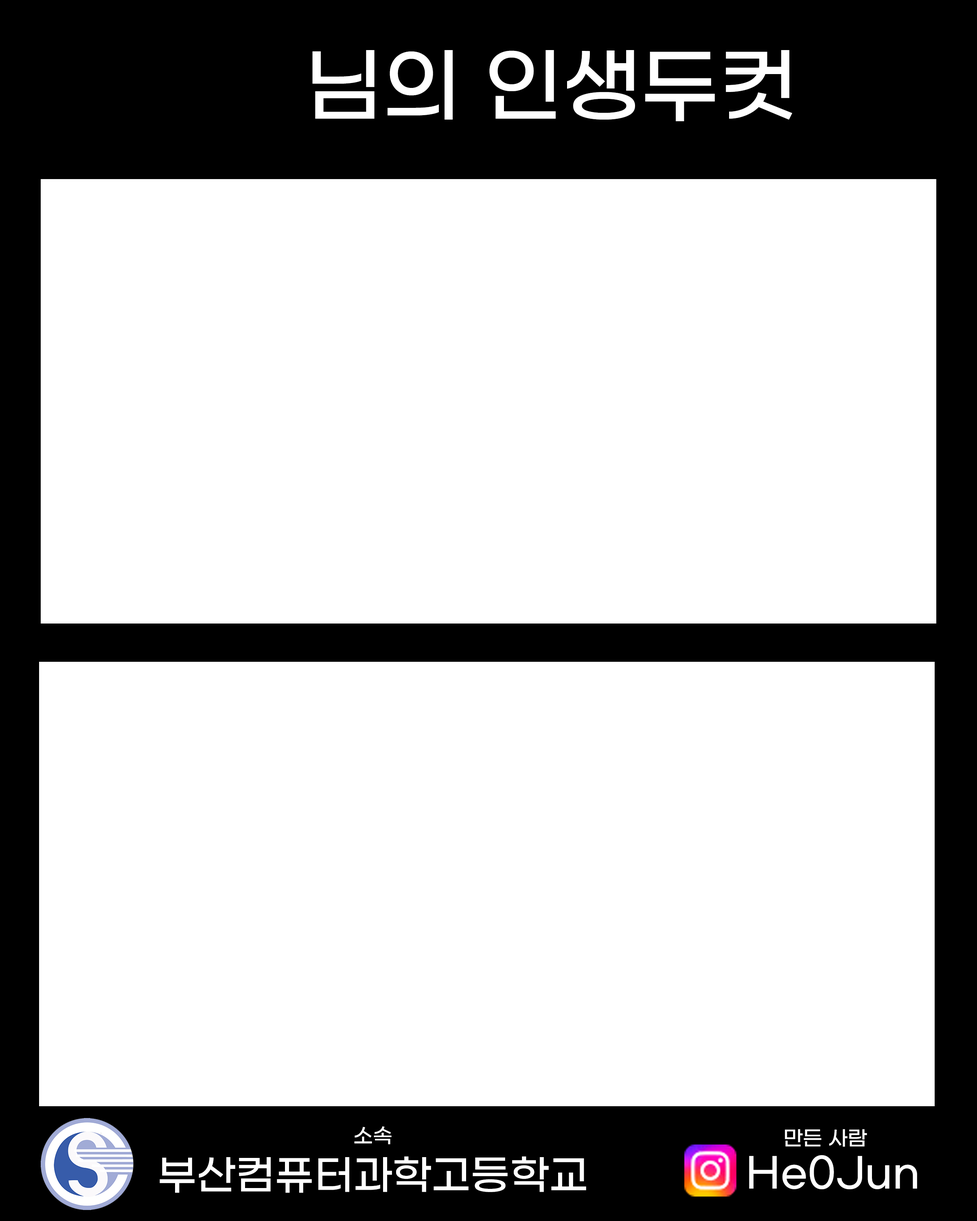
<style>
.page{position:relative;width:977px;height:1221px;background:#ffffff}
.page>*{position:absolute;margin:0}
.t1{font:81.4px "GmarketSansTTFMedium";color:#ffffff}
.t2{font:20.3px "GmarketSansTTFMedium";color:#ffffff}
.t3{font:40.7px "GmarketSansTTFMedium";color:#ffffff}
</style>
<div class="page">
<p class="t1" style="left:312px;top:50px;width:480px;height:71px">님의 인생두컷</p>
<p class="t2" style="left:354px;top:1126px;width:37px;height:18px">소속</p>
<p class="t2" style="left:785px;top:1129px;width:82px;height:18px">만든 사람</p>
<p class="t3" style="left:160px;top:1156px;width:426px;height:37px">부산컴퓨터과학고등학교</p>
<p class="t3" style="left:749px;top:1155px;width:168px;height:34px">He0Jun</p>
</div>
